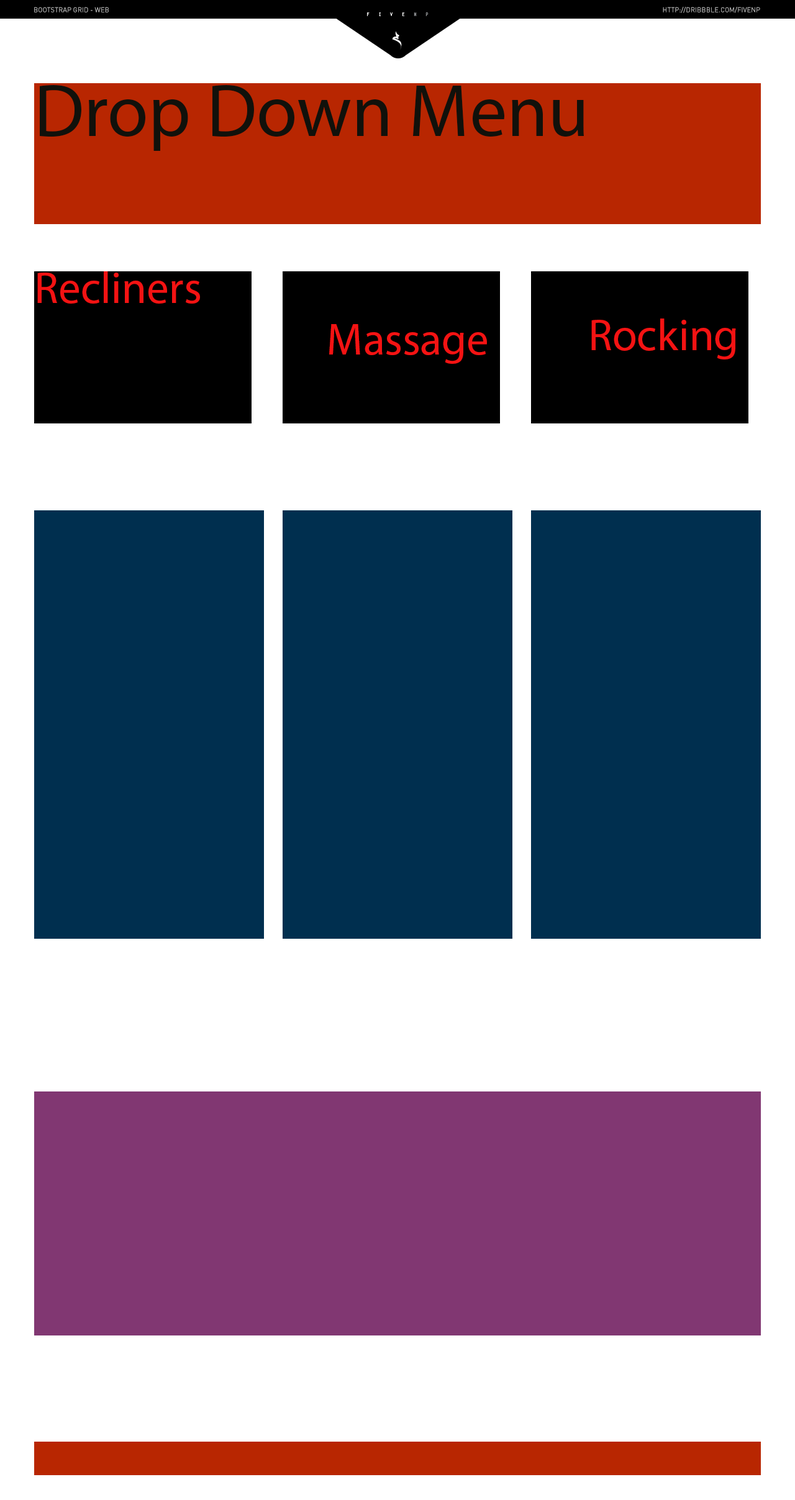
<style>
.page{position:relative;width:795px;height:1500px;background:#ffffff}
.page>*{position:absolute;margin:0}
.t1{font:74.5px "MyriadPro-Regular";color:#11110b}
.t2{font:44.7px "MyriadPro-Regular";color:#f41313}
</style>
<div class="page">
<p class="t1" style="left:40px;top:85px;width:544px;height:66px">Drop Down Menu</p>
<p class="t2" style="left:37px;top:271px;width:163px;height:33px">Recliners</p>
<p class="t2" style="left:329px;top:324px;width:158px;height:40px">Massage</p>
<p class="t2" style="left:591px;top:319px;width:145px;height:41px">Rocking</p>
</div>
